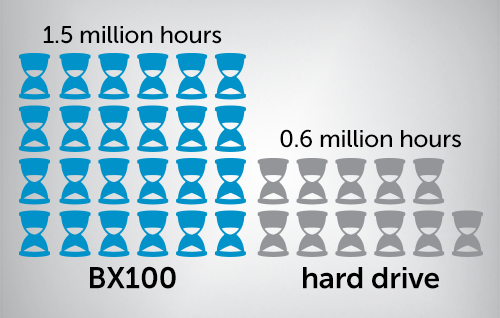
<style>
.page{position:relative;width:500px;height:318px}
.page>*{position:absolute;margin:0}
.t1{font:24px "MuseoSans-500";letter-spacing:-0.01em;color:#000000}
.t2{font:30px "MuseoSans-700";letter-spacing:-0.01em;color:#000000}
</style>
<div class="page">
<p class="t1" style="left:43px;top:26px;width:179px;height:18px">1.5 million hours</p>
<p class="t1" style="left:280px;top:129px;width:181px;height:19px">0.6 million hours</p>
<p class="t2" style="left:90px;top:266px;width:86px;height:23px">BX100</p>
<p class="t2" style="left:303px;top:267px;width:136px;height:22px">hard drive</p>
</div>
